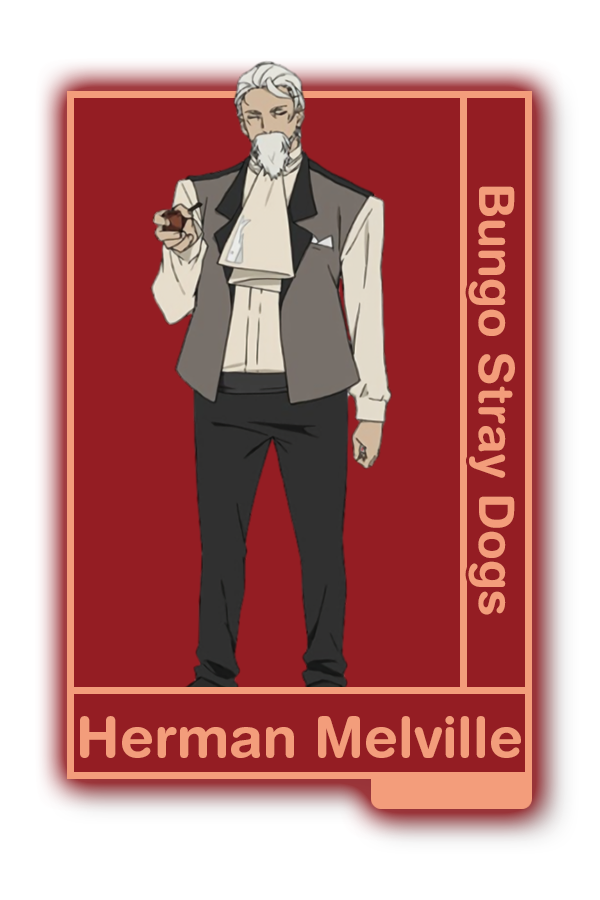
<style>
.page{position:relative;width:600px;height:900px;background:#941d23}
.page>*{position:absolute;margin:0}
.t1{font:48.8px "HelveticaRounded-Bold";color:#f39d7b}
.t2{font:56px "HelveticaRounded-Bold";color:#f39d7b}
</style>
<div class="page">
<p class="t1" style="left:468px;top:186px;width:47px;height:429px;rotate:90deg">Bungo Stray Dogs</p>
<p class="t2" style="left:80px;top:716px;width:441px;height:42px">Herman Melville</p>
</div>
